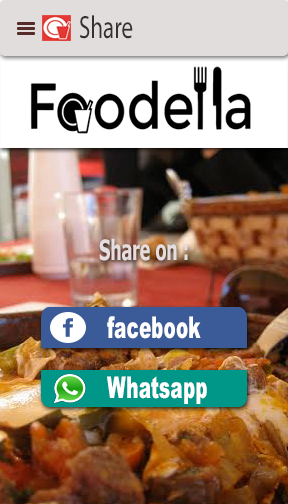
<style>
.page{position:relative;width:288px;height:504px}
.page>*{position:absolute;margin:0}
.t1{font:32.2px "MyriadPro-Regular";color:#34322f;scale:0.71 1}
.t2{font:28.1px "Tahoma-Bold";color:#e6dede;scale:0.63 1}
.t3{font:30px "Arial-Black";color:#ffffff;scale:0.62 1}
</style>
<div class="page">
<p class="t1" style="left:80px;top:15px;width:53px;height:24px">Share</p>
<p class="t2" style="left:99px;top:238px;width:89px;height:23px">Share on :</p>
<p class="t3" style="left:107px;top:316px;width:94px;height:23px">facebook</p>
<p class="t3" style="left:107px;top:376px;width:100px;height:28px">Whatsapp</p>
</div>
